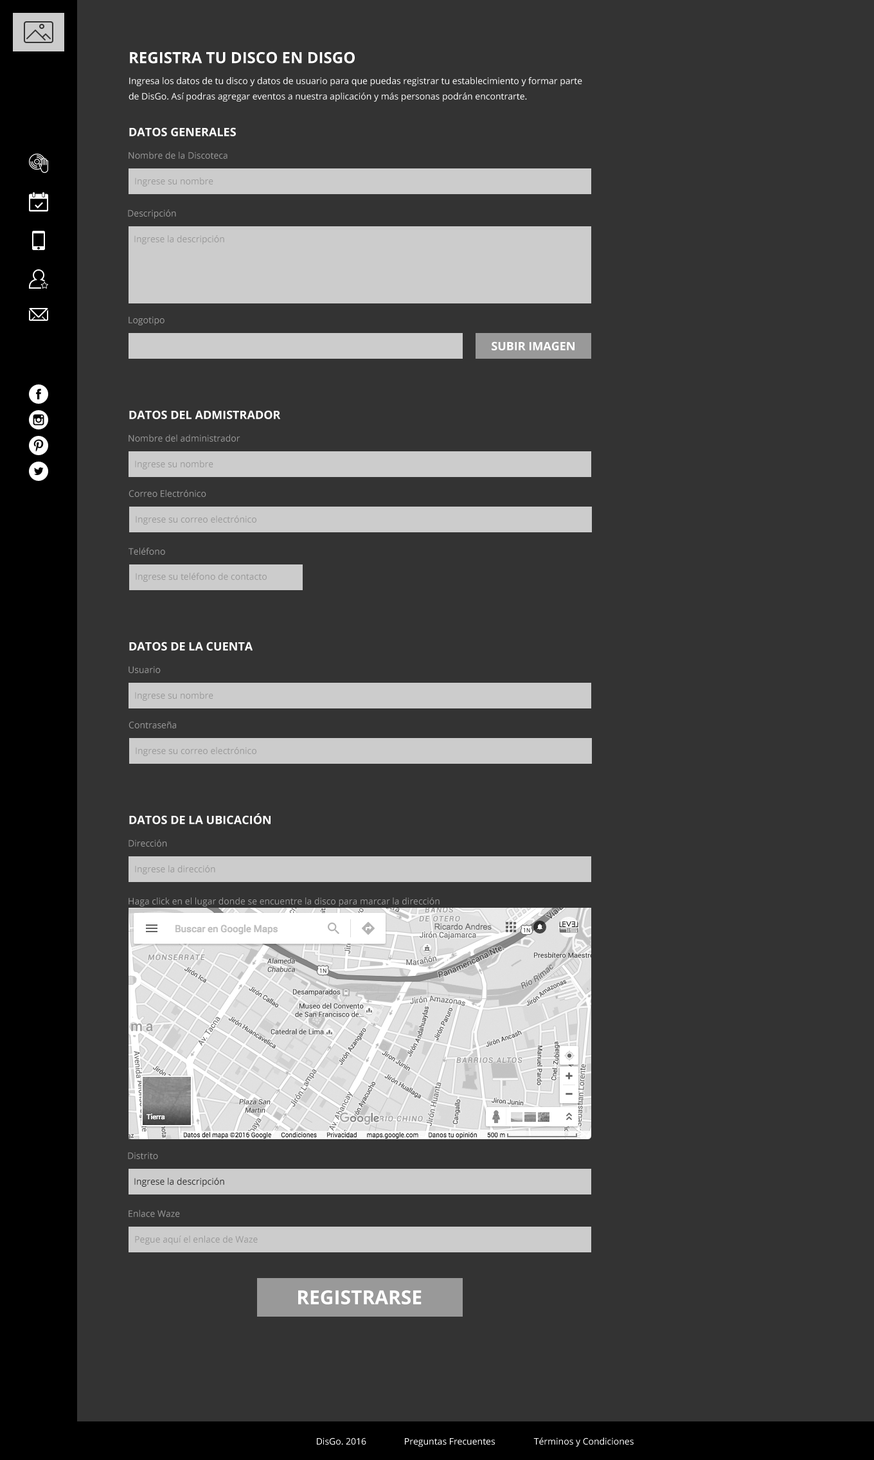
<style>
.page{position:relative;width:874px;height:1460px;background:#333333}
.page>*{position:absolute;margin:0}
.t1{font:15.4px "OpenSans-Bold";color:#ffffff;text-transform:uppercase}
.t2{font:9px/15.4px "OpenSans";color:#ffffff}
.t3{font:11.6px "OpenSans-Bold";color:#ffffff;text-transform:uppercase}
.t4{font:9px "OpenSans";color:#999999}
.t5{font:9px "OpenSans";color:#333333}
.t6{font:19.3px "OpenSans-Bold";color:#ffffff;text-transform:uppercase}
.t7{font:9px "OpenSans";color:#ffffff}
</style>
<div class="page">
<p class="t1" style="left:130px;top:51px;width:225px;height:13px">registra tu disco en disgo</p>
<p class="t2" style="left:129px;top:77px;width:453px;height:25px">Ingresa los datos de tu disco y datos de usuario para que puedas registrar tu establecimiento y formar parte de DisGo. Así podras agregar eventos a nuestra aplicación y más personas podrán encontrarte.</p>
<p class="t3" style="left:129px;top:127px;width:107px;height:9px">Datos Generales</p>
<p class="t4" style="left:129px;top:152px;width:99px;height:7px">Nombre de la Discoteca</p>
<p class="t4" style="left:135px;top:177px;width:78px;height:9px">Ingrese su nombre</p>
<p class="t4" style="left:128px;top:210px;width:48px;height:9px">Descripción</p>
<p class="t4" style="left:134px;top:235px;width:90px;height:9px">Ingrese la descripción</p>
<p class="t4" style="left:129px;top:316px;width:36px;height:9px">Logotipo</p>
<p class="t3" style="left:492px;top:341px;width:83px;height:9px">Subir Imagen</p>
<p class="t3" style="left:129px;top:410px;width:152px;height:9px">Datos del Admistrador</p>
<p class="t4" style="left:129px;top:435px;width:111px;height:7px">Nombre del administrador</p>
<p class="t4" style="left:135px;top:460px;width:78px;height:9px">Ingrese su nombre</p>
<p class="t4" style="left:129px;top:490px;width:77px;height:7px">Correo Electrónico</p>
<p class="t4" style="left:136px;top:516px;width:120px;height:9px">Ingrese su correo electrónico</p>
<p class="t4" style="left:129px;top:548px;width:36px;height:7px">Teléfono</p>
<p class="t4" style="left:136px;top:573px;width:131px;height:9px">Ingrese su teléfono de contacto</p>
<p class="t3" style="left:129px;top:642px;width:124px;height:9px">Datos de la cuenta</p>
<p class="t4" style="left:129px;top:666px;width:32px;height:7px">Usuario</p>
<p class="t4" style="left:135px;top:692px;width:78px;height:9px">Ingrese su nombre</p>
<p class="t4" style="left:129px;top:721px;width:47px;height:7px">Contraseña</p>
<p class="t4" style="left:136px;top:747px;width:120px;height:9px">Ingrese su correo electrónico</p>
<p class="t3" style="left:129px;top:813px;width:142px;height:11px">Datos de la ubicación</p>
<p class="t4" style="left:129px;top:840px;width:38px;height:7px">Dirección</p>
<p class="t4" style="left:135px;top:865px;width:80px;height:9px">Ingrese la dirección</p>
<p class="t4" style="left:129px;top:897px;width:311px;height:9px">Haga click en el lugar donde se encuentre la disco para marcar la dirección</p>
<p class="t4" style="left:128px;top:1152px;width:30px;height:7px">Distrito</p>
<p class="t5" style="left:134px;top:1178px;width:90px;height:9px">Ingrese la descripción</p>
<p class="t4" style="left:129px;top:1210px;width:51px;height:7px">Enlace Waze</p>
<p class="t4" style="left:135px;top:1236px;width:123px;height:9px">Pegue aquí el enlace de Waze</p>
<p class="t6" style="left:298px;top:1290px;width:124px;height:14px">Registrarse</p>
<p class="t7" style="left:317px;top:1437px;width:49px;height:8px">DisGo. 2016</p>
<p class="t7" style="left:405px;top:1438px;width:90px;height:9px">Preguntas Frecuentes</p>
<p class="t7" style="left:534px;top:1437px;width:100px;height:10px">Términos y Condiciones</p>
</div>
